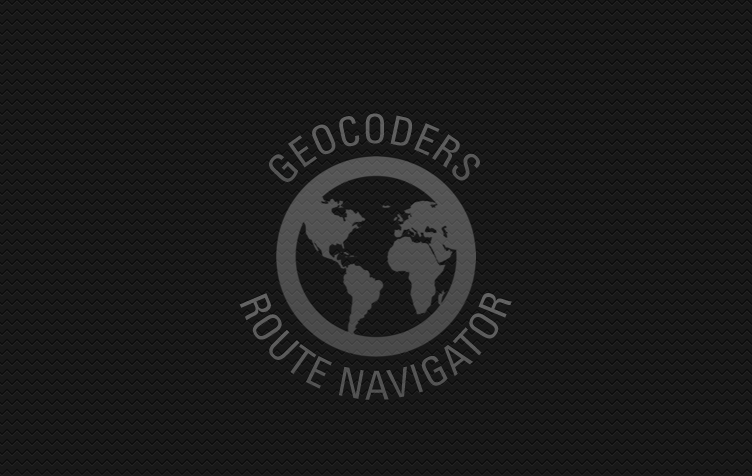
<style>
.page{position:relative;width:752px;height:476px;background:#181818}
.page>*{position:absolute;margin:0}
.t1{font:40px "Univers-Condensed";color:#5b5b5b}
.t2{font:40px "Univers-Condensed";letter-spacing:0.08em;color:#585858}
</style>
<div class="page">
<p class="t1" style="left:269px;top:113px;width:211px;height:69px;text-align:center">GEOCODERS</p>
<p class="t2" style="left:239px;top:293px;width:273px;height:107px;text-align:center">ROUTE NAVIGATOR</p>
</div>
